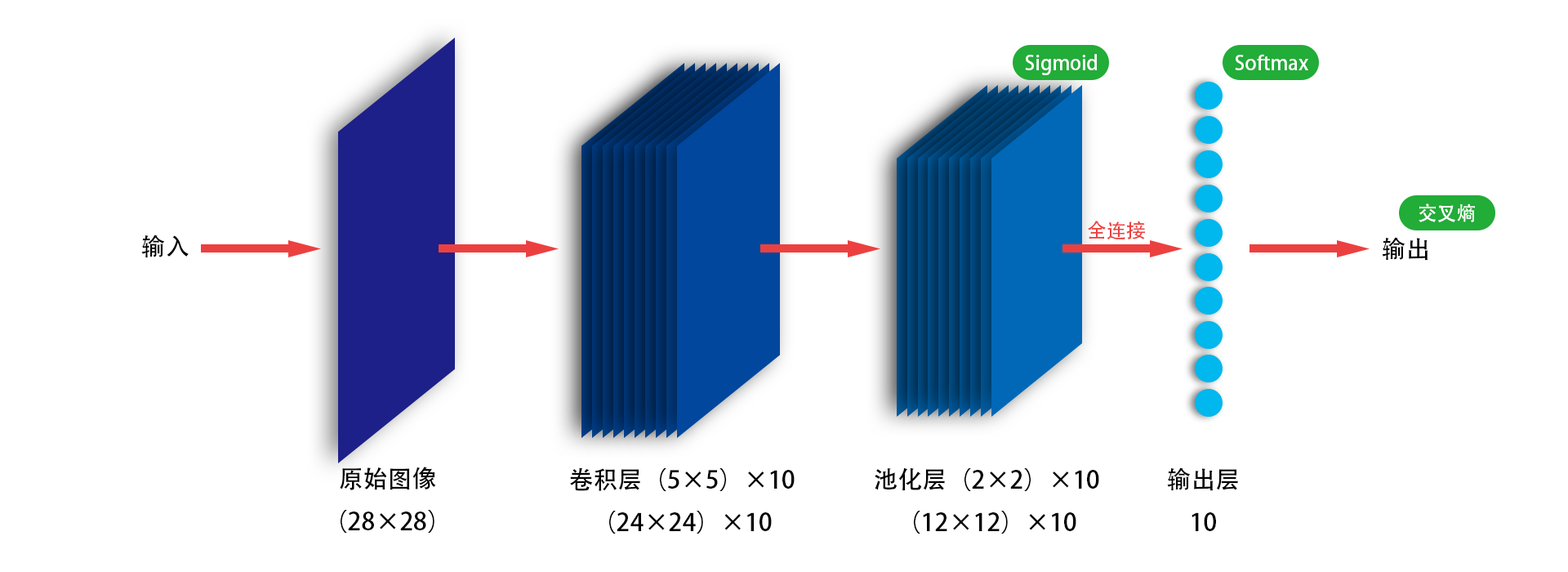
<style>
.page{position:relative;width:1568px;height:572px;background:#ffffff}
.page>*{position:absolute;margin:0}
.t1{font:19.6px "AdobeHeitiStd-Regular";color:#ffffff}
.t2{font:19.6px "AdobeHeitiStd-Regular";color:#ec4040}
.t3{font:24.5px "AdobeHeitiStd-Regular";color:#000000}
</style>
<div class="page">
<p class="t1" style="left:1025px;top:54px;width:72px;height:21px">Sigmoid</p>
<p class="t1" style="left:1235px;top:54px;width:73px;height:16px">Softmax</p>
<p class="t1" style="left:1419px;top:203px;width:56px;height:19px">交叉熵</p>
<p class="t2" style="left:1088px;top:220px;width:57px;height:19px">全连接</p>
<p class="t3" style="left:141px;top:234px;width:48px;height:24px">输入</p>
<p class="t3" style="left:1382px;top:237px;width:46px;height:24px">输出</p>
<p class="t3" style="left:340px;top:466px;width:96px;height:66px;text-align:center">原始图像<br>（28×28）</p>
<p class="t3" style="left:570px;top:467px;width:225px;height:66px;text-align:center">卷积层（5×5）×10<br>（24×24）×10</p>
<p class="t3" style="left:875px;top:467px;width:224px;height:66px;text-align:center">池化层（2×2）×10<br>（12×12）×10</p>
<p class="t3" style="left:1167px;top:467px;width:71px;height:64px;text-align:center">输出层<br>10</p>
</div>
